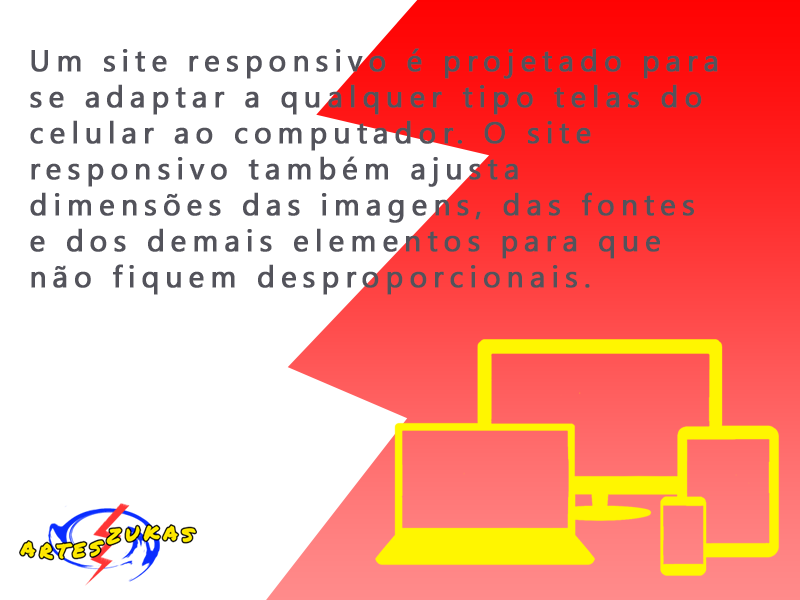
<style>
.page{position:relative;width:800px;height:600px;background:#ffffff}
.page>*{position:absolute;margin:0}
.t1{font:30px "SegoeUI";letter-spacing:0.18em;color:#53535b;font-weight:bold}
</style>
<div class="page">
<p class="t1" style="left:30px;top:48px;width:688px;height:247px">Um site responsivo é projetado para se adaptar a qualquer tipo telas do celular ao computador. O site responsivo também ajusta dimensões das imagens, das fontes e dos demais elementos para que não fiquem desproporcionais.</p>
</div>
